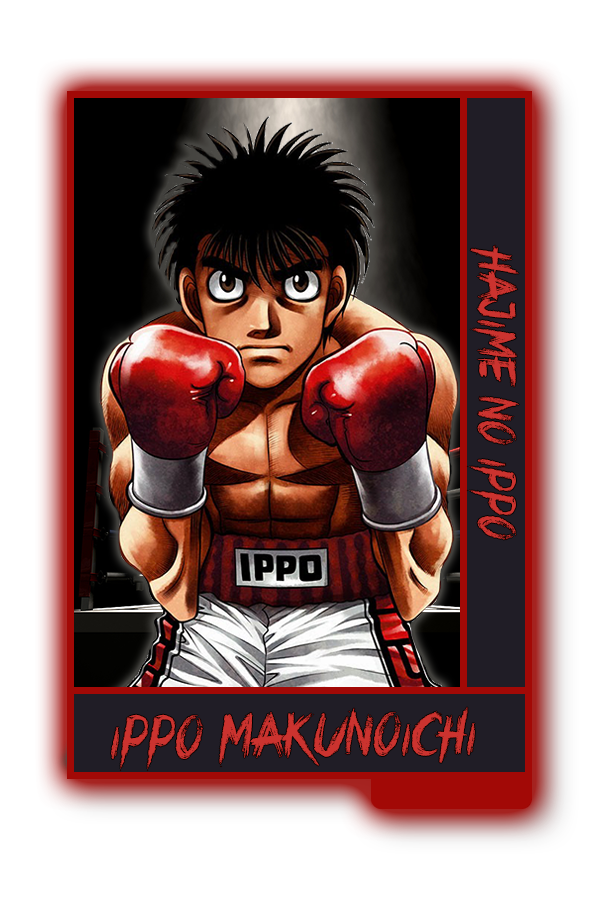
<style>
.page{position:relative;width:600px;height:900px;background:#ffffff}
.page>*{position:absolute;margin:0}
.t1{font:54.2px "CrimesTimesSix";color:#cb332f}
.t2{font:62.5px "CrimesTimesSix";color:#cb332f}
</style>
<div class="page">
<p class="t1" style="left:467px;top:245px;width:52px;height:295px;rotate:90deg">Hajime No Ippo</p>
<p class="t2" style="left:111px;top:707px;width:364px;height:64px;rotate:-1deg">Ippo Makunoichi</p>
</div>
